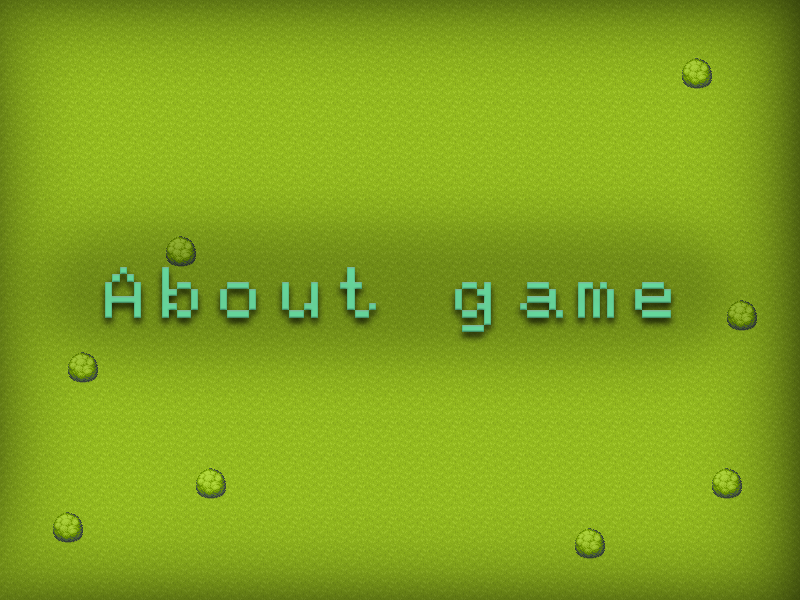
<style>
.page{position:relative;width:800px;height:600px}
.page>*{position:absolute;margin:0}
.t1{font:144px "BK0010";color:#65d098}
</style>
<div class="page">
<p class="t1" style="left:105px;top:267px;width:566px;height:65px">About game</p>
</div>
